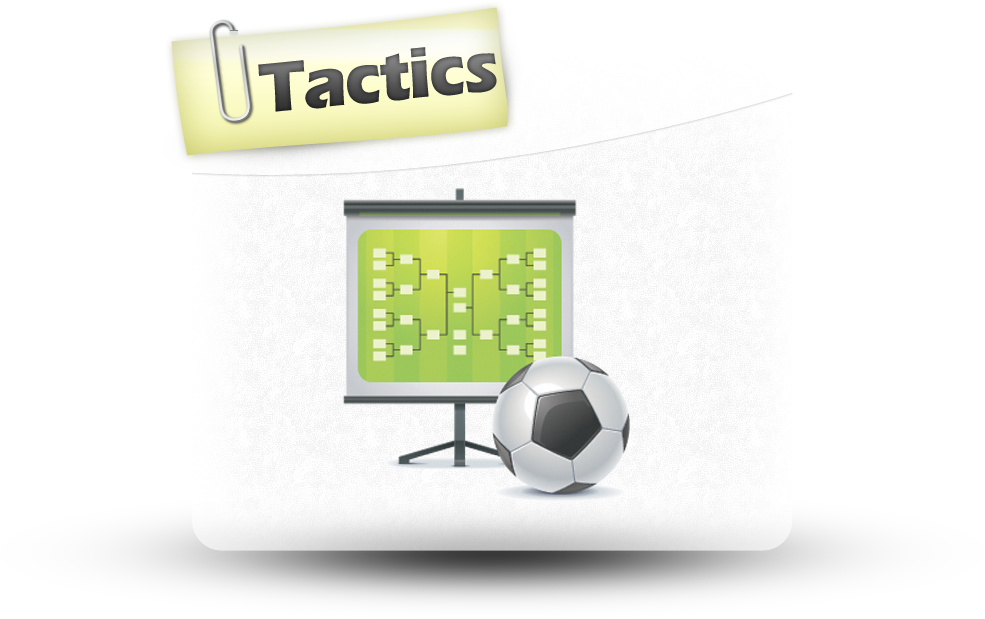
<style>
.page{position:relative;width:985px;height:619px;background:#ffffff}
.page>*{position:absolute;margin:0}
.t1{font:72px "ErasITC-Bold";letter-spacing:-0.05em;color:#4c4c4c;font-weight:bold}
</style>
<div class="page">
<p class="t1" style="left:258px;top:47px;width:239px;height:65px;rotate:-6deg">Tactics</p>
</div>
